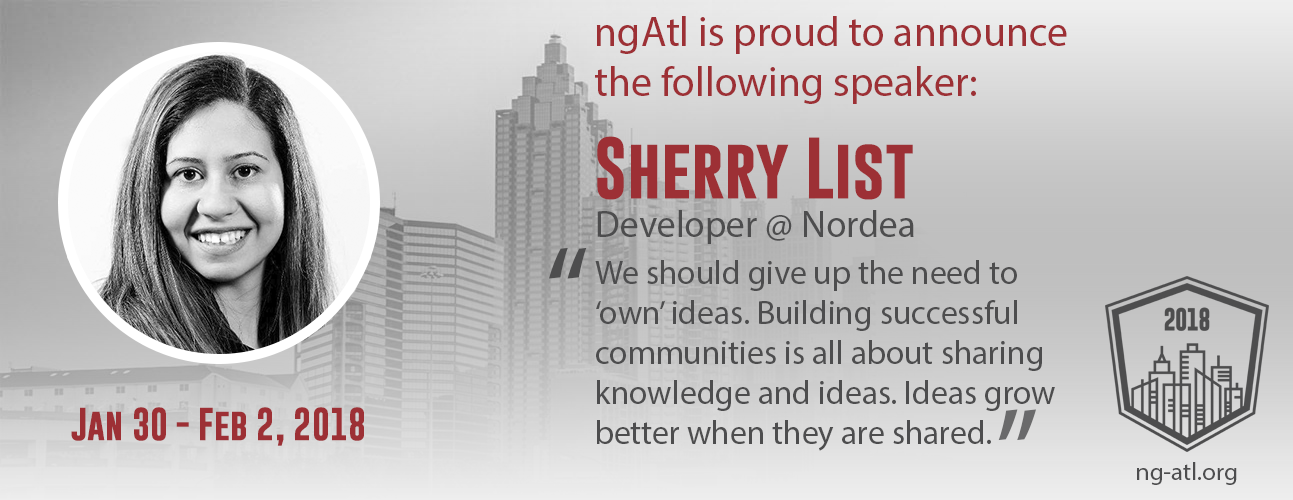
<style>
.page{position:relative;width:1293px;height:500px}
.page>*{position:absolute;margin:0}
.t1{font:41.7px "MyriadPro-Regular";color:#9d3035}
.t2{font:62.5px "GoboldBold";color:#9d3035}
.t3{font:37.5px "MyriadPro-Regular";color:#4d4d4e}
.t4{font:125px "MyriadPro-Regular";color:#4d4d4e}
.t5{font:33.3px "MyriadPro-Regular";color:#4d4d4e}
.t6{font:33.3px "GoboldBold";color:#9d3035}
.t7{font:125px "MyriadPro-Regular";color:#6a6a6b}
.t8{font:25px "MyriadPro-Regular";color:#4d4d4e}
</style>
<div class="page">
<p class="t1" style="left:595px;top:16px;width:472px;height:88px">ngAtl is proud to announce the following speaker:</p>
<p class="t2" style="left:597px;top:136px;width:316px;height:64px">Sherry List</p>
<p class="t3" style="left:597px;top:210px;width:317px;height:34px">Developer @ Nordea</p>
<p class="t4" style="left:549px;top:247px;width:38px;height:32px">“</p>
<p class="t5" style="left:595px;top:260px;width:460px;height:191px">We should give up the need to ‘own’ ideas. Building successful communities is all about sharing knowledge and ideas. Ideas grow better when they are shared.</p>
<p class="t6" style="left:71px;top:407px;width:293px;height:39px">Jan 30 - Feb 2, 2018</p>
<p class="t7" style="left:998px;top:409px;width:38px;height:32px;rotate:180deg">“</p>
<p class="t8" style="left:1137px;top:462px;width:100px;height:23px">ng-atl.org</p>
</div>
